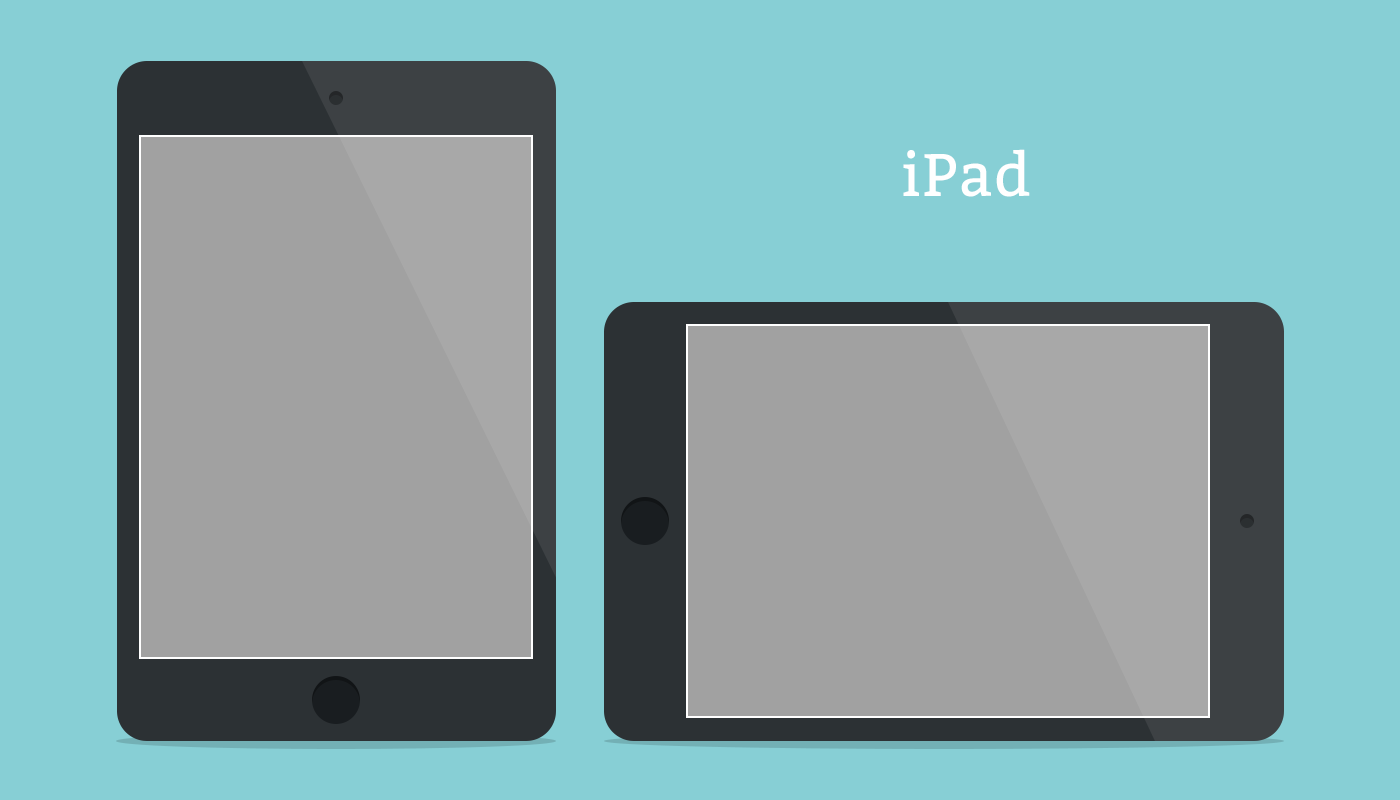
<style>
.page{position:relative;width:1400px;height:800px;background:#87cfd5}
.page>*{position:absolute;margin:0}
.t1{font:60px "Bitter-Regular";letter-spacing:0.02em;color:#ffffff}
</style>
<div class="page">
<p class="t1" style="left:903px;top:149px;width:127px;height:48px">iPad</p>
</div>
